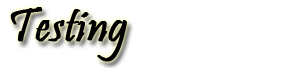
<style>
.page{position:relative;width:301px;height:68px;background:#ffffff}
.page>*{position:absolute;margin:0}
.t1{font:48px "Pristina-Regular";color:#000000;font-weight:bold}
</style>
<div class="page">
<p class="t1" style="left:10px;top:7px;width:117px;height:55px">Testing</p>
</div>
